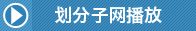
<style>
.page{position:relative;width:196px;height:31px;background:#3d8bbd}
.page>*{position:absolute;margin:0}
.t1{font:18.1px "HiraginoSansGB-W6";color:#ffffff}
</style>
<div class="page">
<p class="t1" style="left:55px;top:6px;width:107px;height:18px">划分子网播放</p>
</div>
